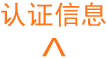
<style>
.page{position:relative;width:107px;height:58px;background:#ffffff}
.page>*{position:absolute;margin:0}
.t1{font:26.6px "SimHei";color:#ff7418;text-transform:uppercase}
.t2{font:26.7px "004-CAI978";color:#ff7418;text-transform:uppercase;scale:2 1}
</style>
<div class="page">
<p class="t1" style="left:1px;top:2px;width:105px;height:25px">认证信息</p>
<p class="t2" style="left:42px;top:38px;width:24px;height:19px">V</p>
</div>
